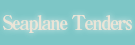
<style>
.page{position:relative;width:135px;height:45px;background:#7dc6c6}
.page>*{position:absolute;margin:0}
.t1{font:20px "RyuminPro-ExBold";letter-spacing:-0.08em;color:#f1e6d8;scale:0.9 1}
</style>
<div class="page">
<p class="t1" style="left:3px;top:15px;width:129px;height:18px">Seaplane Tenders</p>
</div>
